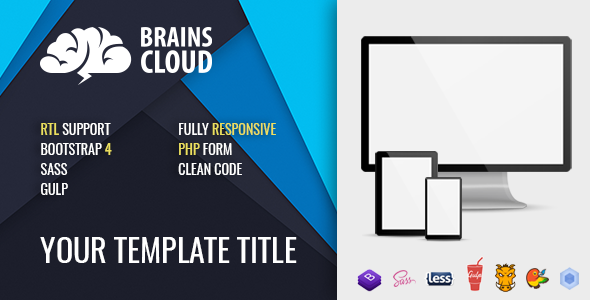
<style>
.page{position:relative;width:590px;height:300px}
.page>*{position:absolute;margin:0}
.t1{font:14px/20px "Oswald-Regular";color:#ffffff;text-transform:uppercase}
.t2{font:14px/20px "Oswald-Regular";color:#ebdf5f;text-transform:uppercase}
.t3{font:32px "Oswald-Regular";color:#ffffff;text-transform:uppercase}
</style>
<div class="page">
<p class="t1" style="left:41px;top:123px;width:71px;height:72px"><span class="t2">RTL</span> support<br>Bootstrap <span class="t2">4<br></span>SASS<br>Gulp</p>
<p class="t1" style="left:178px;top:123px;width:98px;height:52px">Fully <span class="t2">responsive<br>php</span> form<br>clean code</p>
<p class="t3" style="left:40px;top:237px;width:257px;height:26px">Your template title</p>
</div>
